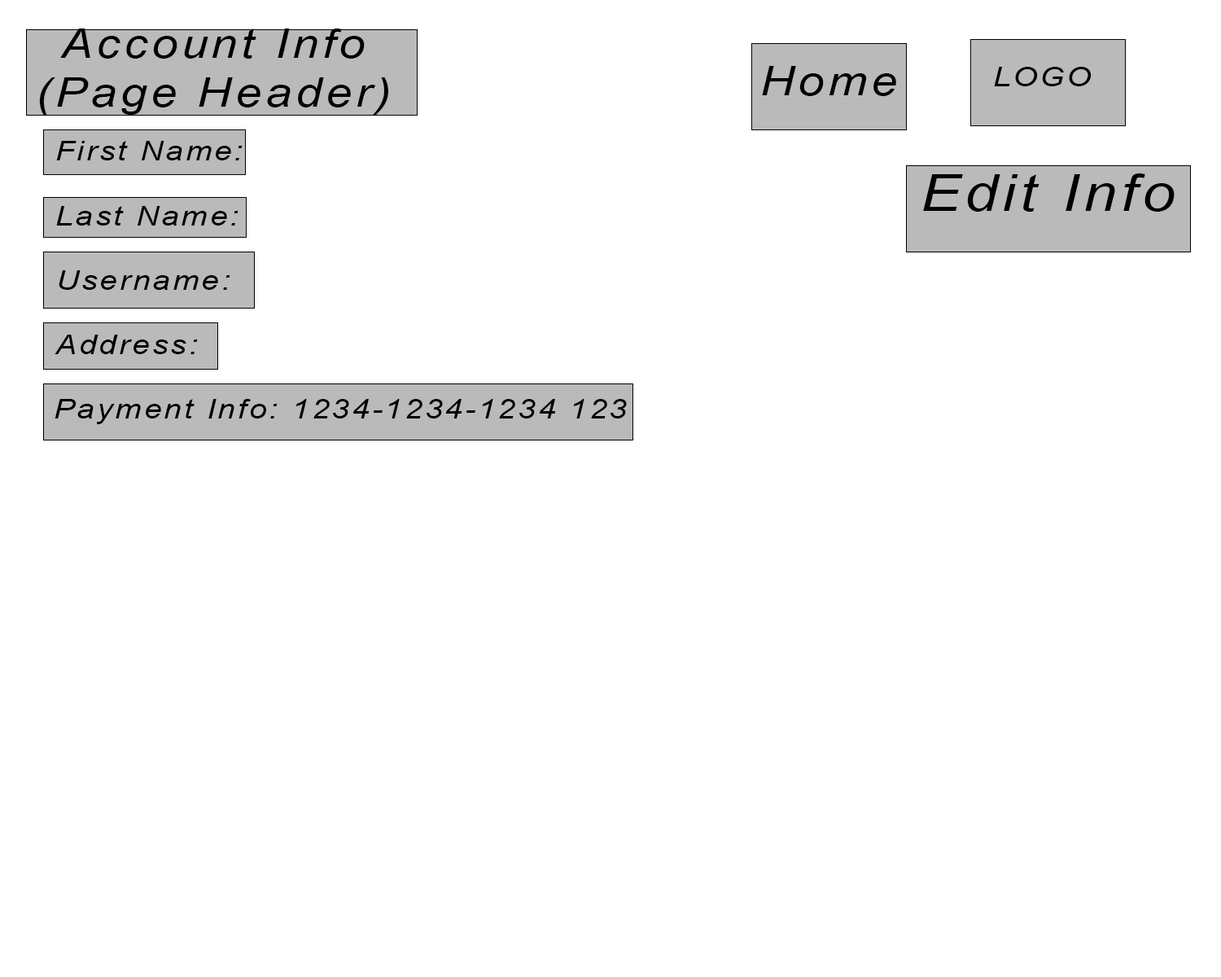
<style>
.page{position:relative;width:1221px;height:977px;background:#ffffff}
.page>*{position:absolute;margin:0}
.t1{font:40.7px "Arial-ItalicMT";letter-spacing:0.08em;color:#000000;scale:1.16 1}
.t2{font:27.1px "Arial-ItalicMT";letter-spacing:0.08em;color:#000000;scale:1.16 1}
.t3{font:50.9px "Arial-ItalicMT";letter-spacing:0.08em;color:#000000;scale:1.16 1}
</style>
<div class="page">
<p class="t1" style="left:39px;top:28px;width:349px;height:87px;text-align:center">Account Info<br>(Page Header)</p>
<p class="t1" style="left:762px;top:66px;width:134px;height:30px">Home</p>
<p class="t2" style="left:994px;top:67px;width:97px;height:19px">LOGO</p>
<p class="t2" style="left:56px;top:141px;width:187px;height:19px">First Name:</p>
<p class="t3" style="left:923px;top:173px;width:251px;height:39px">Edit Info</p>
<p class="t2" style="left:56px;top:206px;width:182px;height:19px">Last Name:</p>
<p class="t2" style="left:59px;top:270px;width:171px;height:20px">Username:</p>
<p class="t2" style="left:55px;top:335px;width:143px;height:19px">Address:</p>
<p class="t2" style="left:55px;top:399px;width:572px;height:25px">Payment Info: 1234-1234-1234 123</p>
</div>
